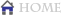
<style>
.page{position:relative;width:65px;height:15px;background:#ffffff}
.page>*{position:absolute;margin:0}
.t1{font:12px "CharlemagneStd-Bold";color:#cccccc}
</style>
<div class="page">
<p class="t1" style="left:19px;top:2px;width:42px;height:11px">Home</p>
</div>
